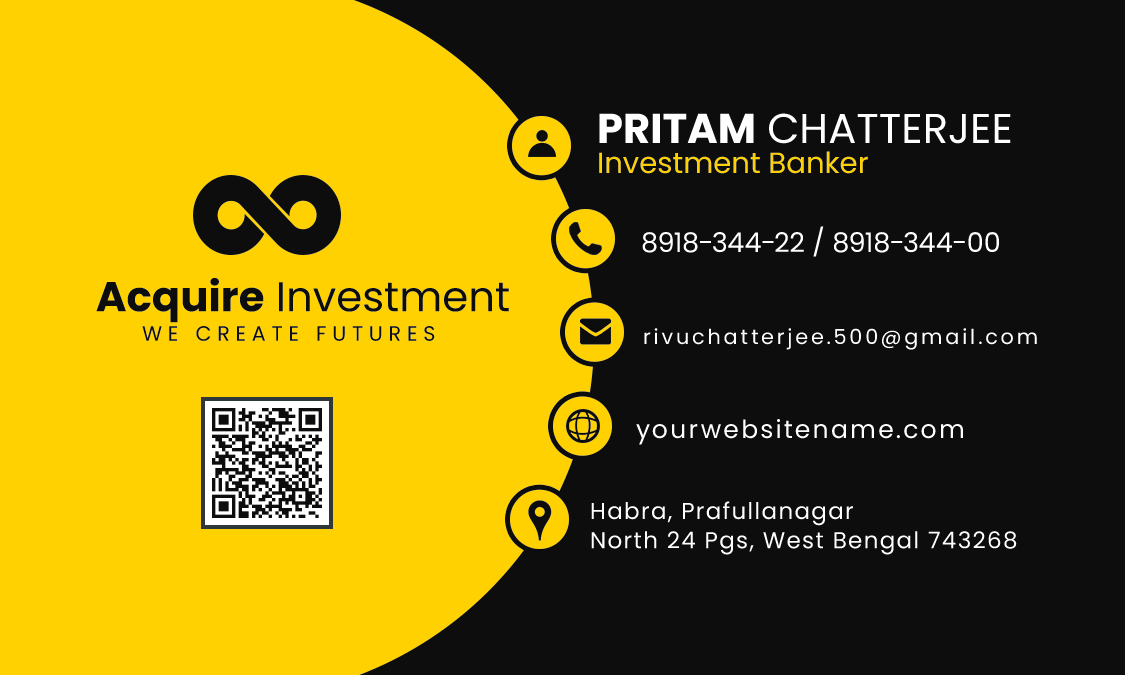
<style>
.page{position:relative;width:1125px;height:675px;background:#0d0d0d}
.page>*{position:absolute;margin:0}
.t1{font:41.7px "Poppins-Regular";color:#ffffff;text-transform:uppercase}
.t2{font:41.7px "Poppins-Bold";color:#ffffff;text-transform:uppercase}
.t3{font:29.2px "Poppins-Regular";color:#ffd100}
.t4{font:27.1px "Poppins-Regular";color:#ffffff}
.t5{font:41.7px "Poppins-Regular";color:#0d0d0d}
.t6{font:41.7px "Poppins-Bold";color:#0d0d0d}
.t7{font:20.8px "Poppins-Regular";letter-spacing:0.28em;color:#0d0d0d}
.t8{font:20.8px "Poppins-Regular";letter-spacing:0.14em;color:#ffffff}
.t9{font:25px "Poppins-Regular";letter-spacing:0.1em;color:#ffffff}
.t10{font:22.9px/29.2px "Poppins-Regular";letter-spacing:0.06em;color:#ffffff}
</style>
<div class="page">
<p class="t1" style="left:599px;top:113px;width:412px;height:31px"><span class="t2">PRITAM</span> CHATTERJEE</p>
<p class="t3" style="left:599px;top:151px;width:269px;height:23px">Investment Banker</p>
<p class="t4" style="left:642px;top:226px;width:357px;height:31px">8918-344-22 / 8918-344-00</p>
<p class="t5" style="left:96px;top:278px;width:413px;height:45px"><span class="t6">Acquire</span> Investment</p>
<p class="t7" style="left:142px;top:326px;width:293px;height:15px">WE CREATE FUTURES</p>
<p class="t8" style="left:644px;top:328px;width:393px;height:22px">rivuchatterjee.500@gmail.com</p>
<p class="t9" style="left:636px;top:419px;width:327px;height:26px">yourwebsitename.com</p>
<p class="t10" style="left:591px;top:501px;width:426px;height:54px">Habra, Prafullanagar<br>North 24 Pgs, West Bengal 743268</p>
</div>
